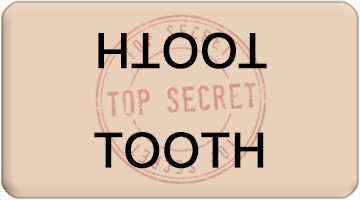
<style>
.page{position:relative;width:360px;height:200px;background:#e8d0bb}
.page>*{position:absolute;margin:0}
.t1{font:48px "ArialMT";color:#000000;font-weight:bold}
</style>
<div class="page">
<p class="t1" style="left:98px;top:32px;width:169px;height:37px;rotate:180deg">TOOTH</p>
<p class="t1" style="left:94px;top:132px;width:170px;height:37px">TOOTH</p>
</div>
